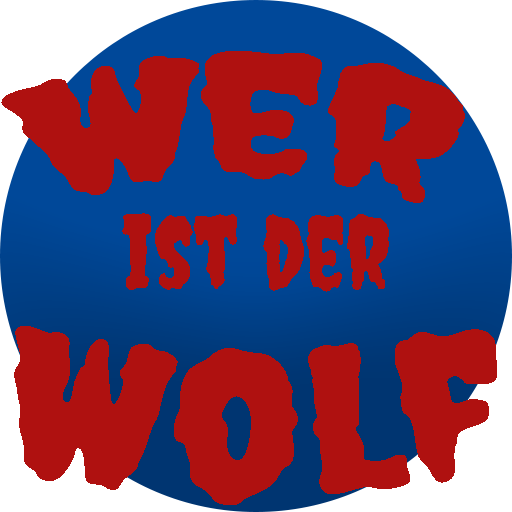
<style>
.page{position:relative;width:512px;height:512px;background:#af1110}
.page>*{position:absolute;margin:0}
.t1{font:166.7px "Creepster-Regular";color:#af1110}
.t2{font:100px "Creepster-Regular";color:#af1110}
.t3{font:200px "Creepster-Regular";color:#af1110}
</style>
<div class="page">
<p class="t1" style="left:1px;top:51px;width:464px;height:152px">Wer</p>
<p class="t2" style="left:122px;top:213px;width:267px;height:79px">ist der</p>
<p class="t3" style="left:14px;top:326px;width:483px;height:179px">Wolf</p>
</div>
